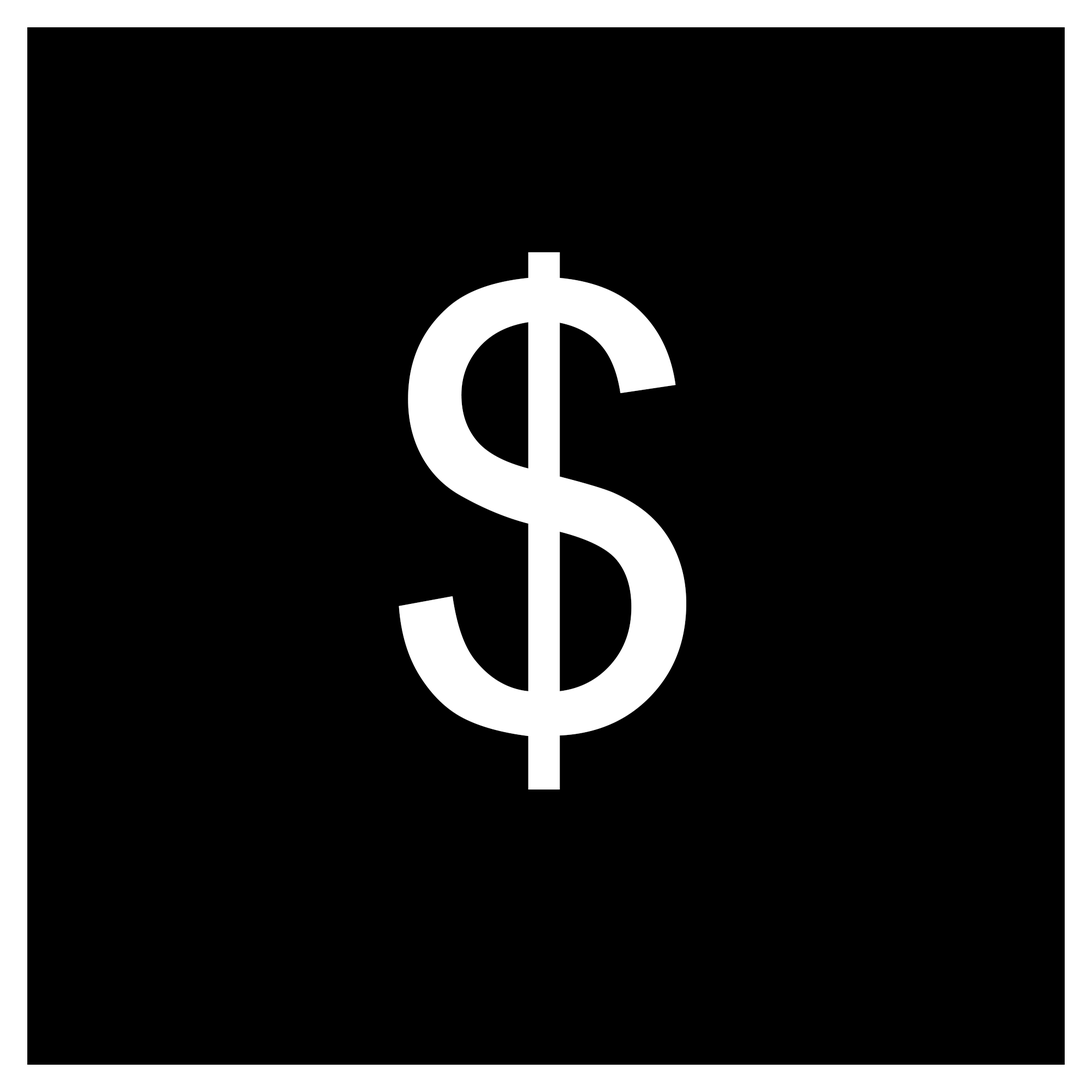
<style>
.page{position:relative;width:1092px;height:1092px;background:#000000}
.page>*{position:absolute;margin:0}
.t1{font:606.7px "ArialMT";color:#ffffff}
</style>
<div class="page">
<p class="t1" style="left:399px;top:252px;width:287px;height:538px">$</p>
</div>
